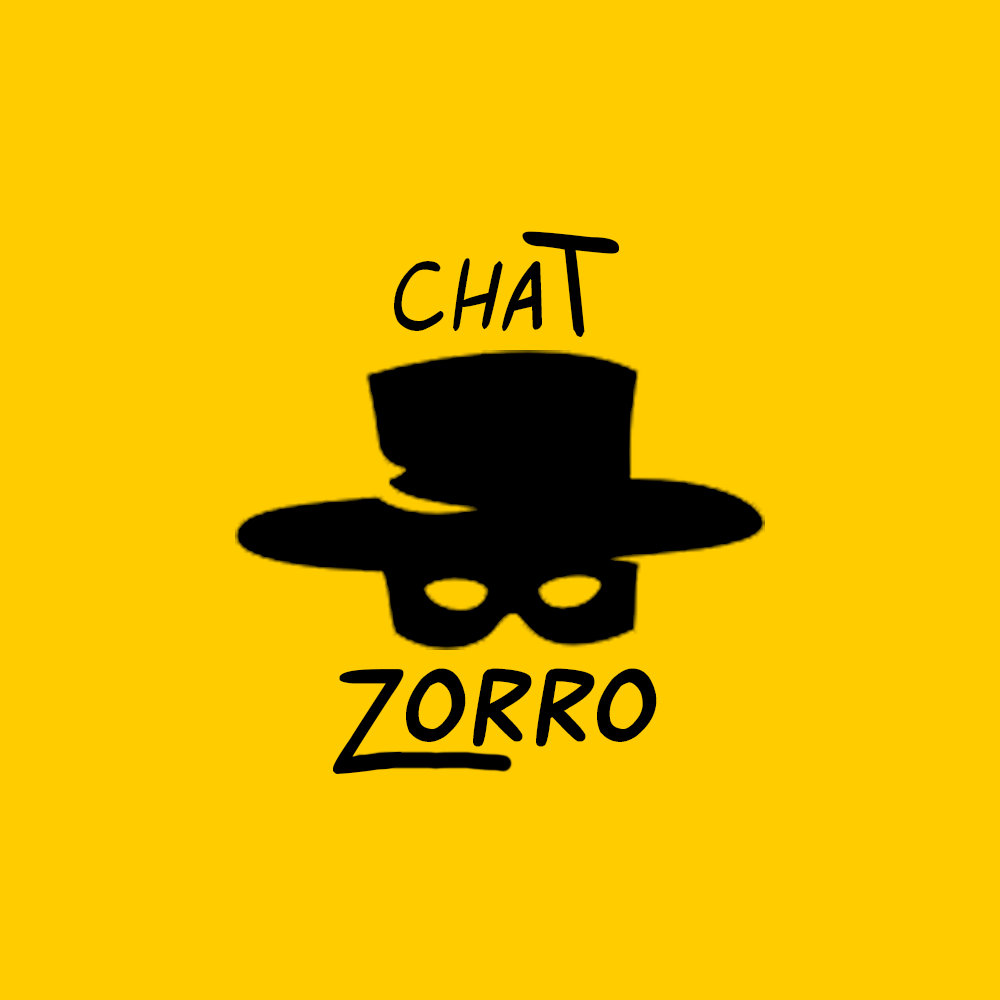
<style>
.page{position:relative;width:1000px;height:1000px;background:#ffcc00}
.page>*{position:absolute;margin:0}
.t1{font:150px "RoofRunners";letter-spacing:0.075em;color:#000000}
.t2{font:100px "RoofRunners";letter-spacing:0.075em;color:#000000}
.t3{font:100px "Roofrunners-Bold";letter-spacing:0.075em;color:#000000}
</style>
<div class="page">
<p class="t1" style="left:522px;top:231px;width:97px;height:106px;rotate:180deg">T</p>
<p class="t2" style="left:394px;top:258px;width:148px;height:73px">CHA</p>
<p class="t1" style="left:333px;top:669px;width:71px;height:105px">Z</p>
<p class="t3" style="left:406px;top:668px;width:251px;height:79px">orro</p>
</div>
